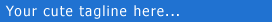
<style>
.page{position:relative;width:272px;height:22px;background:#2072d1}
.page>*{position:absolute;margin:0}
.t1{font:14px "Tahoma";letter-spacing:0.075em;color:#ffffff}
</style>
<div class="page">
<p class="t1" style="left:5px;top:5px;width:174px;height:14px">Your cute tagline here...</p>
</div>
